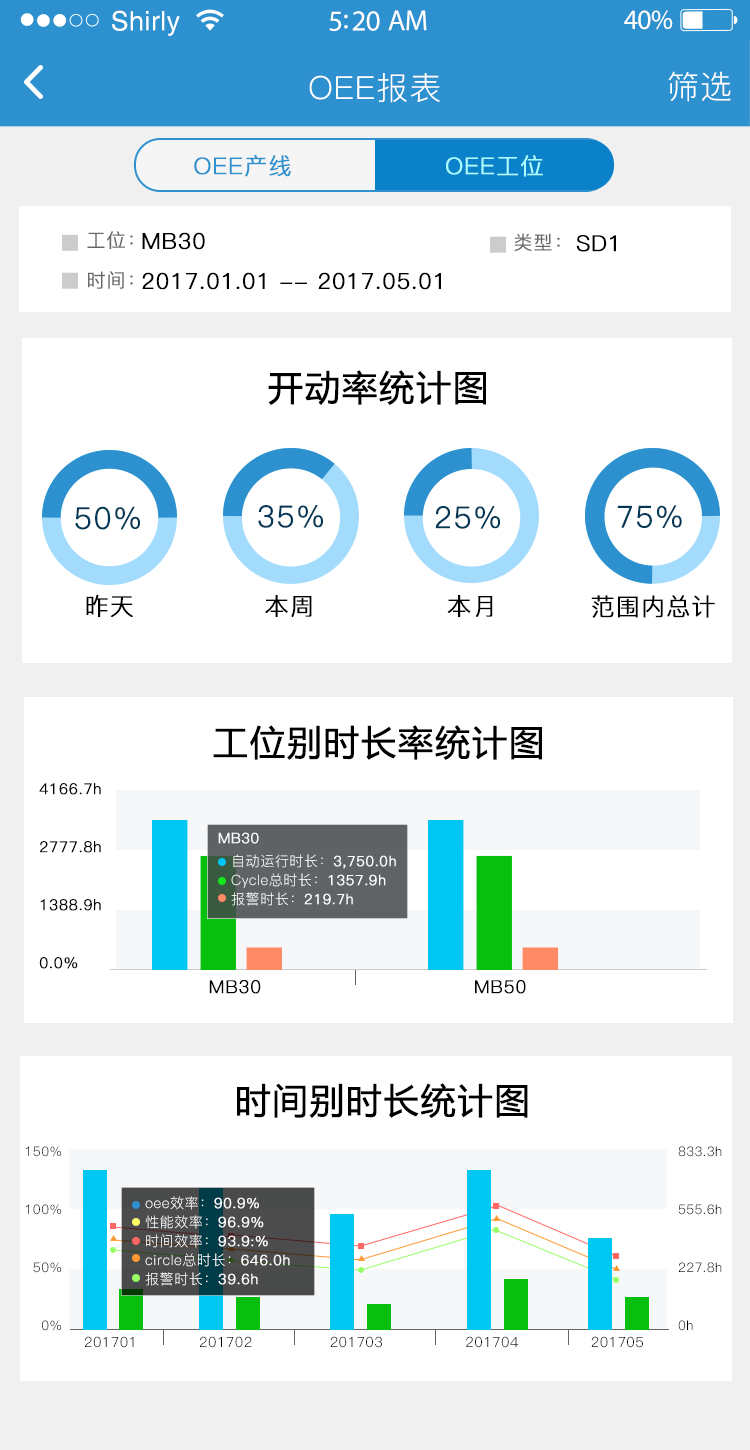
<style>
.page{position:relative;width:750px;height:1450px;background:#ffffff}
.page>*{position:absolute;margin:0}
.t1{font:26.8px "Helvetica";letter-spacing:0.02em;color:#ffffff}
.t2{font:29.1px "MyriadPro-Regular";letter-spacing:-0.02em;color:#ffffff}
.t3{font:27.9px "MyriadPro-Regular";letter-spacing:-0.02em;color:#ffffff}
.t4{font:32px "PingFang-SC-Regular";letter-spacing:0.03em;color:#ffffff}
.t5{font:19px/20px "PingFang-SC-Regular";letter-spacing:0.03em;color:#686767;font-weight:bold}
.t6{font:19px/20px "PingFang-SC-Regular";letter-spacing:0.03em;color:#686868;font-weight:bold}
.t7{font:22px/20px "PingFang-SC-Regular";letter-spacing:0.03em;color:#000000;font-weight:bold}
.t8{font:19px "PingFang-SC-Regular";letter-spacing:0.03em;color:#686868;font-weight:bold}
.t9{font:22px "PingFang-SC-Regular";letter-spacing:0.03em;color:#000000;font-weight:bold}
.t10{font:35px "MicrosoftYaHei";letter-spacing:0.03em;color:#000000;font-weight:bold}
.t11{font:30px "PingFang-SC-Regular";letter-spacing:0.03em;color:#013857;font-weight:bold}
.t12{font:24.1px "PingFang-SC-Regular";letter-spacing:0.03em;color:#000000;font-weight:bold}
.t13{font:15px/29px "PingFang-SC-Regular";letter-spacing:0.03em;color:#000000;font-weight:bold}
.t14{font:14.2px "PingFang-SC-Regular";letter-spacing:0.03em;color:#ffffff;font-weight:bold}
.t15{font:14.2px/19px "PingFang-SC-Regular";letter-spacing:0.03em;color:#ffffff}
.t16{font:14.2px/19px "PingFang-SC-Regular";letter-spacing:0.03em;color:#ffffff;font-weight:bold}
.t17{font:18px "PingFang-SC-Regular";letter-spacing:0.03em;color:#000000;font-weight:bold}
.t18{font:13.2px/29px "PingFang-SC-Regular";letter-spacing:0.03em;color:#000000}
.t19{font:14.2px "PingFang-SC-Regular";letter-spacing:0.03em;color:#000000}
</style>
<div class="page">
<p class="t1" style="left:112px;top:10px;width:68px;height:26px">Shirly</p>
<p class="t2" style="left:329px;top:10px;width:98px;height:21px">5:20 AM</p>
<p class="t3" style="left:624px;top:10px;width:49px;height:20px">40%</p>
<p class="t4" style="left:309px;top:73px;width:131px;height:30px">OEE报表</p>
<p class="t4" style="left:668px;top:71px;width:63px;height:31px">筛选</p>
<p class="t5" style="left:87px;top:231px;width:46px;height:58px;text-align:right">工位：<br><br><span class="t6">时间：</span></p>
<p class="t7" style="left:142px;top:232px;width:299px;height:58px">MB30<br><br>2017.01.01 -- 2017.05.01</p>
<p class="t8" style="left:514px;top:233px;width:46px;height:18px">类型：</p>
<p class="t9" style="left:576px;top:235px;width:40px;height:17px">SD1</p>
<p class="t10" style="left:268px;top:370px;width:218px;height:35px">开动率统计图</p>
<p class="t11" style="left:75px;top:506px;width:65px;height:24px">50%</p>
<p class="t11" style="left:258px;top:505px;width:65px;height:23px">35%</p>
<p class="t11" style="left:435px;top:506px;width:65px;height:23px">25%</p>
<p class="t11" style="left:617px;top:505px;width:65px;height:23px">75%</p>
<p class="t12" style="left:86px;top:594px;width:47px;height:23px">昨天</p>
<p class="t12" style="left:265px;top:595px;width:47px;height:22px">本周</p>
<p class="t12" style="left:447px;top:595px;width:46px;height:22px">本月</p>
<p class="t12" style="left:591px;top:595px;width:124px;height:23px">范围内总计</p>
<p class="t10" style="left:213px;top:725px;width:329px;height:35px">工位别时长率统计图</p>
<p class="t13" style="left:39px;top:783px;width:62px;height:186px">4166.7h<br><br>2777.8h<br><br>1388.9h<br><br>0.0%</p>
<p class="t14" style="left:218px;top:832px;width:41px;height:12px">MB30</p>
<p class="t15" style="left:231px;top:854px;width:165px;height:52px">自动运行时长：<span class="t16">3,750.0h<br></span>Cycle总时长：<span class="t16">1357.9h<br></span>报警时长：<span class="t16">219.7h</span></p>
<p class="t17" style="left:209px;top:980px;width:317px;height:14px">MB30                      MB50</p>
<p class="t10" style="left:237px;top:1083px;width:291px;height:35px">时间别时长统计图</p>
<p class="t18" style="left:26px;top:1146px;width:36px;height:185px;text-align:right">150%<br><br>100%<br><br>50%<br><br>0%</p>
<p class="t18" style="left:678px;top:1146px;width:44px;height:185px">833.3h<br><br>555.6h<br><br>227.8h<br><br>0h</p>
<p class="t15" style="left:145px;top:1196px;width:145px;height:90px">oee效率：<span class="t16">90.9%<br></span>性能效率：<span class="t16">96.9%<br></span>时间效率：<span class="t16">93.9:%<br></span>circle总时长：<span class="t16">646.0h<br></span>报警时长：<span class="t16">39.6h</span></p>
<p class="t19" style="left:85px;top:1336px;width:558px;height:12px">201701            201702               201703                201704              201705</p>
</div>
